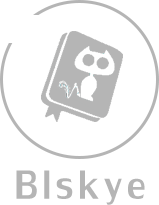
<style>
.page{position:relative;width:159px;height:205px;background:#ffffff}
.page>*{position:absolute;margin:0}
.t1{font:60.5px "LilyUPC";letter-spacing:0.1em;color:#b5b5b5;scale:0.91 1}
</style>
<div class="page">
<p class="t1" style="left:16px;top:170px;width:129px;height:35px">Blskye</p>
</div>
